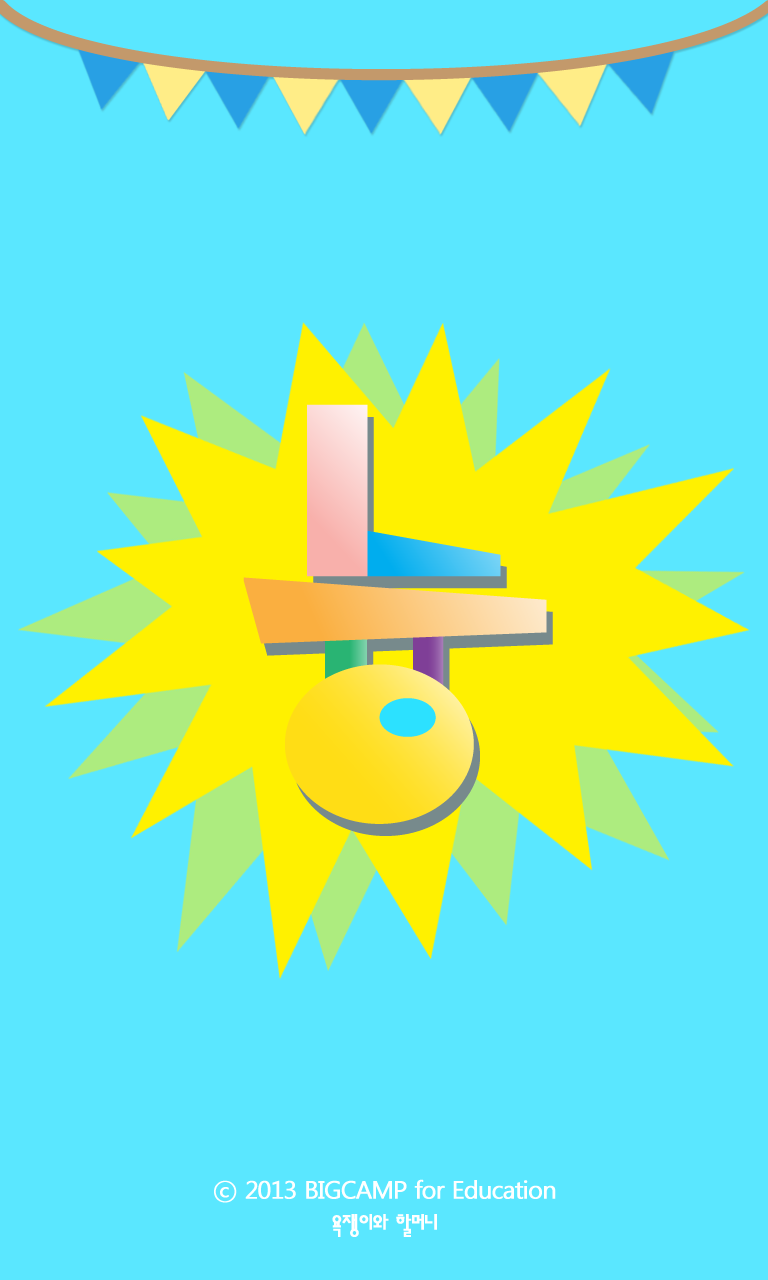
<style>
.page{position:relative;width:768px;height:1280px;background:#5ae7ff}
.page>*{position:absolute;margin:0}
.t1{font:24.4px "MalgunGothicRegular";letter-spacing:-0.05em;color:#ffffff;font-weight:bold}
.t2{font:24.4px "ahn2006-M";letter-spacing:-0.05em;color:#ffffff;font-weight:bold}
</style>
<div class="page">
<p class="t1" style="left:214px;top:1179px;width:342px;height:24px">ⓒ 2013 BIGCAMP for Education</p>
<p class="t2" style="left:332px;top:1214px;width:105px;height:23px">욕쟁이와 할머니</p>
</div>
